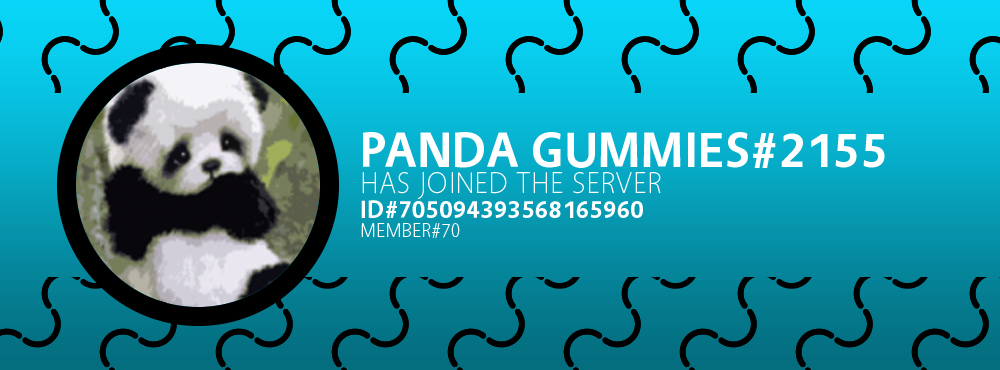
<style>
.page{position:relative;width:1000px;height:370px}
.page>*{position:absolute;margin:0}
.t1{font:50px "Vegur-Bold";letter-spacing:0.025em;color:#ffffff;text-transform:uppercase}
.t2{font:30px "Vegur-Light";letter-spacing:0.025em;color:#ffffff;text-transform:uppercase}
.t3{font:25px "Vegur-Bold";letter-spacing:0.025em;color:#ffffff;text-transform:uppercase}
.t4{font:20px "Vegur-Light";letter-spacing:0.025em;color:#ffffff;text-transform:uppercase}
</style>
<div class="page">
<p class="t1" style="left:363px;top:132px;width:522px;height:36px">panda gummies#2155</p>
<p class="t2" style="left:362px;top:172px;width:299px;height:28px">has joined the server</p>
<p class="t3" style="left:361px;top:200px;width:282px;height:18px">id#705094393568165960</p>
<p class="t4" style="left:361px;top:223px;width:99px;height:15px">member#70</p>
</div>
